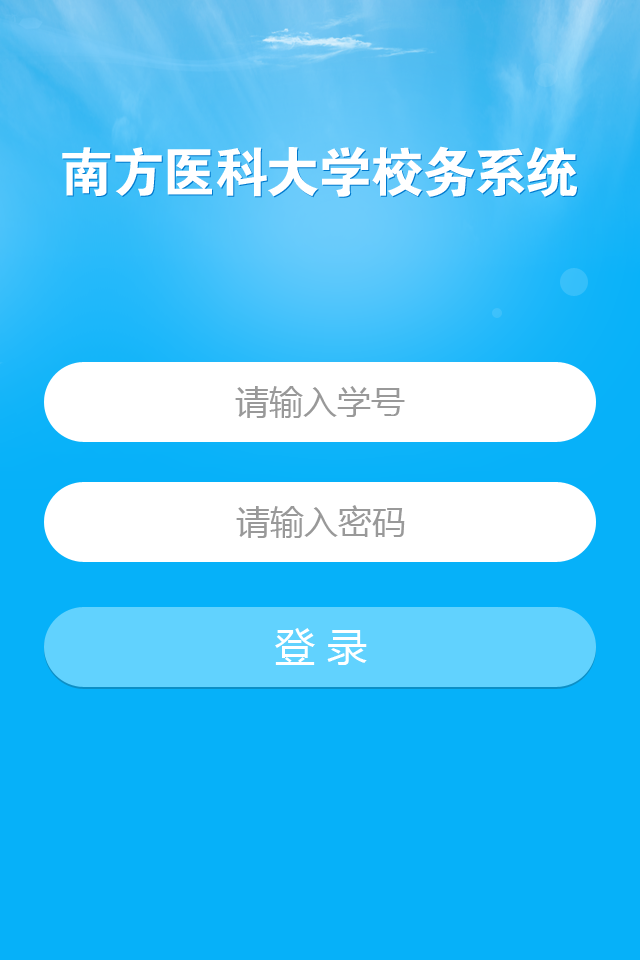
<style>
.page{position:relative;width:640px;height:960px;background:#06b1f9}
.page>*{position:absolute;margin:0}
.t1{font:54px "FZDHTJW--GB1-0";letter-spacing:-0.04em;color:#ffffff}
.t2{font:34px "MicrosoftYaHei";color:#999999}
.t3{font:40px "MicrosoftYaHei";color:#ffffff}
</style>
<div class="page">
<p class="t1" style="left:62px;top:146px;width:515px;height:51px">南方医科大学校务系统</p>
<p class="t2" style="left:235px;top:386px;width:170px;height:32px">请输入学号</p>
<p class="t2" style="left:236px;top:505px;width:169px;height:33px">请输入密码</p>
<p class="t3" style="left:275px;top:628px;width:92px;height:37px">登 录</p>
</div>
